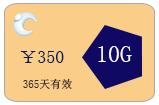
<style>
.page{position:relative;width:159px;height:105px;background:#facd89}
.page>*{position:absolute;margin:0}
.t1{font:18px "SimSun";color:#091e54}
.t2{font:24px "SimSun";color:#fef9f9}
.t3{font:11px "SimSun";color:#352a2a}
</style>
<div class="page">
<p class="t1" style="left:20px;top:51px;width:44px;height:12px">￥350</p>
<p class="t2" style="left:98px;top:46px;width:34px;height:16px">10G</p>
<p class="t3" style="left:23px;top:78px;width:49px;height:12px">365天有效</p>
</div>
